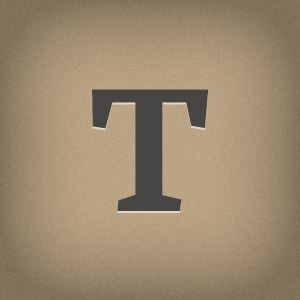
<style>
.page{position:relative;width:300px;height:300px}
.page>*{position:absolute;margin:0}
.t1{font:200px "Neuton-Bold";color:#474644}
</style>
<div class="page">
<p class="t1" style="left:92px;top:89px;width:117px;height:122px">T</p>
</div>
